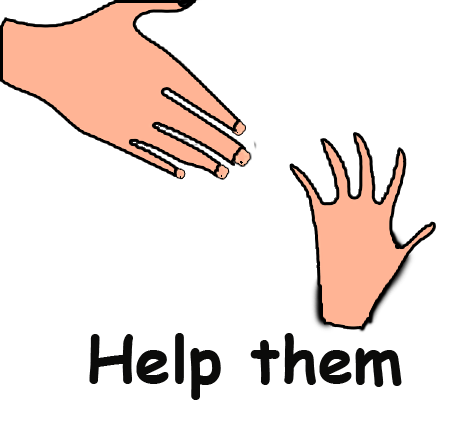
<style>
.page{position:relative;width:453px;height:433px;background:#ffffff}
.page>*{position:absolute;margin:0}
.t1{font:64px "ComicSansMS-Bold";color:#0b0b0a}
</style>
<div class="page">
<p class="t1" style="left:89px;top:333px;width:313px;height:67px">Help them</p>
</div>
